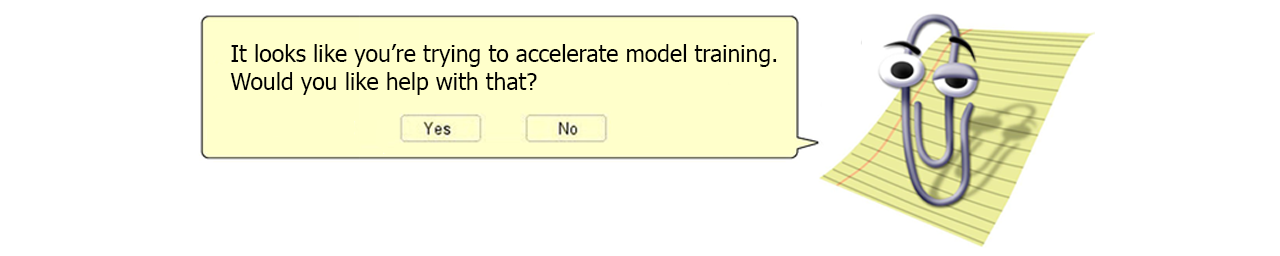
<style>
.page{position:relative;width:1280px;height:256px;background:#ffffff}
.page>*{position:absolute;margin:0}
.t1{font:23px "Tahoma";color:#000000}
</style>
<div class="page">
<p class="t1" style="left:230px;top:44px;width:547px;height:51px">It looks like you’re trying to accelerate model training.<br>Would you like help with that?</p>
</div>
